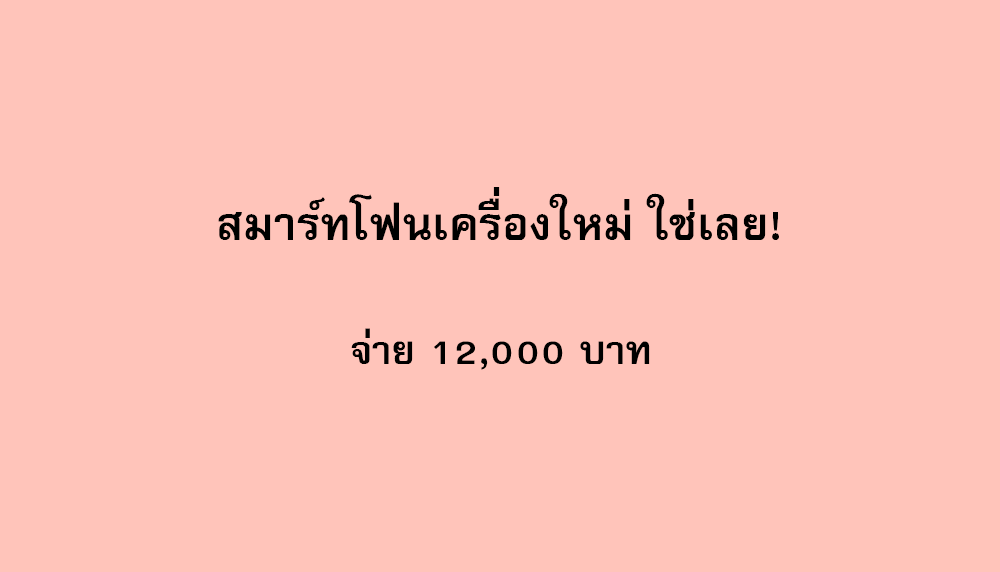
<style>
.page{position:relative;width:1000px;height:572px;background:#ffc4ba}
.page>*{position:absolute;margin:0}
.t1{font:64px "FreesiaUPCBold";color:#000000}
.t2{font:56px "FreesiaUPCBold";color:#000000}
</style>
<div class="page">
<p class="t1" style="left:218px;top:187px;width:561px;height:53px">สมาร์ทโฟนเครื่องใหม่ ใช่เลย!</p>
<p class="t2" style="left:351px;top:328px;width:299px;height:42px">จ่าย 12,000 บาท</p>
</div>
